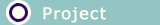
<style>
.page{position:relative;width:160px;height:25px;background:#94c5c5}
.page>*{position:absolute;margin:0}
.t1{font:16px "Verdana";letter-spacing:0.055em;color:#fffff0;font-weight:bold}
</style>
<div class="page">
<p class="t1" style="left:43px;top:7px;width:63px;height:16px">Project</p>
</div>
